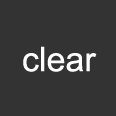
<style>
.page{position:relative;width:116px;height:116px;background:#333333}
.page>*{position:absolute;margin:0}
.t1{font:34px "ArialMT";color:#ffffff}
</style>
<div class="page">
<p class="t1" style="left:23px;top:46px;width:74px;height:26px">clear</p>
</div>
